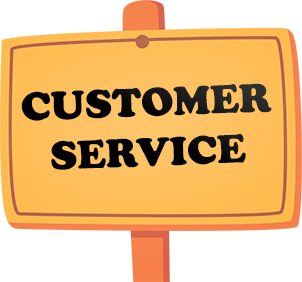
<style>
.page{position:relative;width:302px;height:282px;background:#ffffff}
.page>*{position:absolute;margin:0}
.t1{font:41.7px "CooperBlack";color:#000000}
</style>
<div class="page">
<p class="t1" style="left:21px;top:83px;width:251px;height:87px;text-align:center;rotate:-2deg">CUSTOMER<br>SERVICE</p>
</div>
